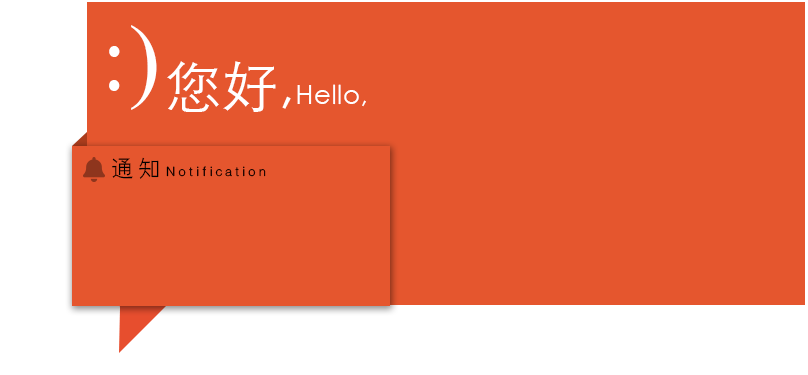
<style>
.page{position:relative;width:808px;height:375px;background:#e5562e}
.page>*{position:absolute;margin:0}
.t1{font:94px "TimesNewRomanPSMT";letter-spacing:0.02em;color:#ffffff}
.t2{font:26px "STXihei";letter-spacing:0.02em;color:#ffffff}
.t3{font:56px "STXihei";letter-spacing:0.02em;color:#ffffff}
.t4{font:13px "HGXH1_CNKI";letter-spacing:0.24em;color:#000000}
.t5{font:22px "HGXH1_CNKI";letter-spacing:0.24em;color:#000000}
</style>
<div class="page">
<p class="t1" style="left:109px;top:25px;width:48px;height:85px">:)</p>
<p class="t2" style="left:167px;top:61px;width:199px;height:51px"><span class="t3">您好,</span>Hello,</p>
<p class="t4" style="left:112px;top:157px;width:154px;height:22px"><span class="t5">通知</span>Notification</p>
</div>
